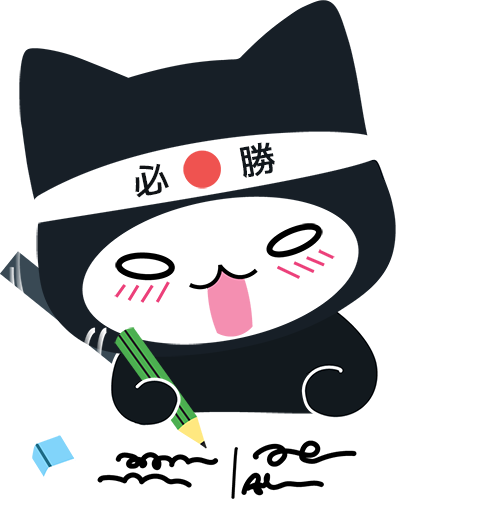
<style>
.page{position:relative;width:498px;height:505px;background:#ffffff}
.page>*{position:absolute;margin:0}
.t1{font:36.1px "mplus-2m-medium";color:#11171c}
.t2{font:36.1px "mplus-2m-medium";color:#101316}
</style>
<div class="page">
<p class="t1" style="left:239px;top:142px;width:36px;height:36px">勝</p>
<p class="t2" style="left:135px;top:163px;width:34px;height:35px">必</p>
</div>
